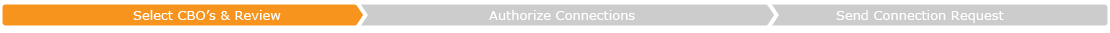
<style>
.page{position:relative;width:1110px;height:33px;background:#ffffff}
.page>*{position:absolute;margin:0}
.t1{font:13px "Verdana";color:#ffffff}
</style>
<div class="page">
<p class="t1" style="left:133px;top:10px;width:148px;height:10px">Select CBO’s &amp; Review</p>
<p class="t1" style="left:489px;top:10px;width:146px;height:10px">Authorize Connections</p>
<p class="t1" style="left:836px;top:10px;width:168px;height:13px">Send Connection Request</p>
</div>
